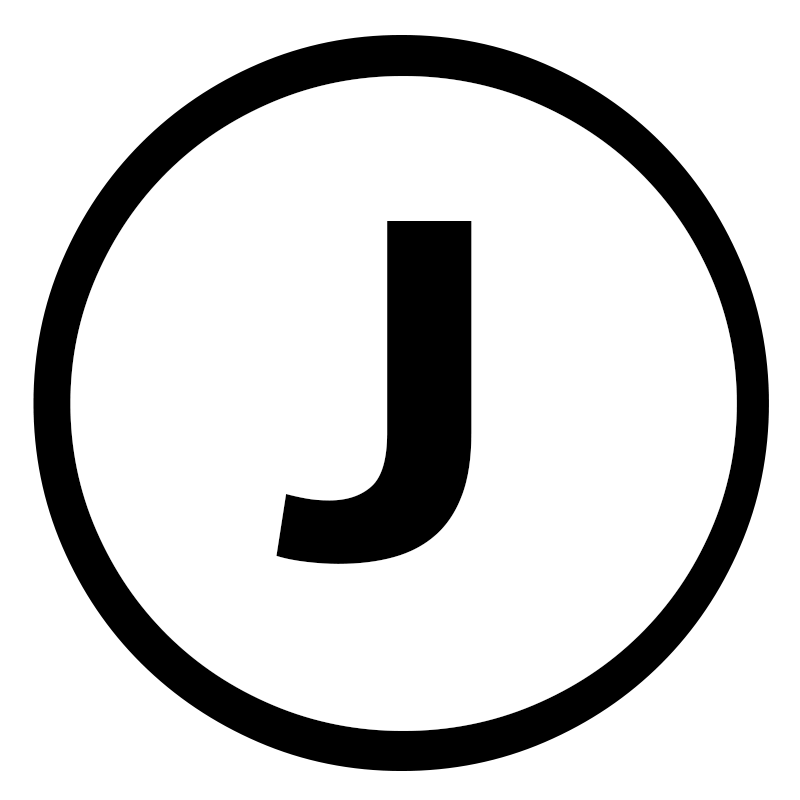
<style>
.page{position:relative;width:800px;height:800px;background:#ffffff}
.page>*{position:absolute;margin:0}
.t1{font:803.4px "TINspirekeys";color:#000000}
</style>
<div class="page">
<p class="t1" style="left:33px;top:35px;width:736px;height:736px">J</p>
</div>
